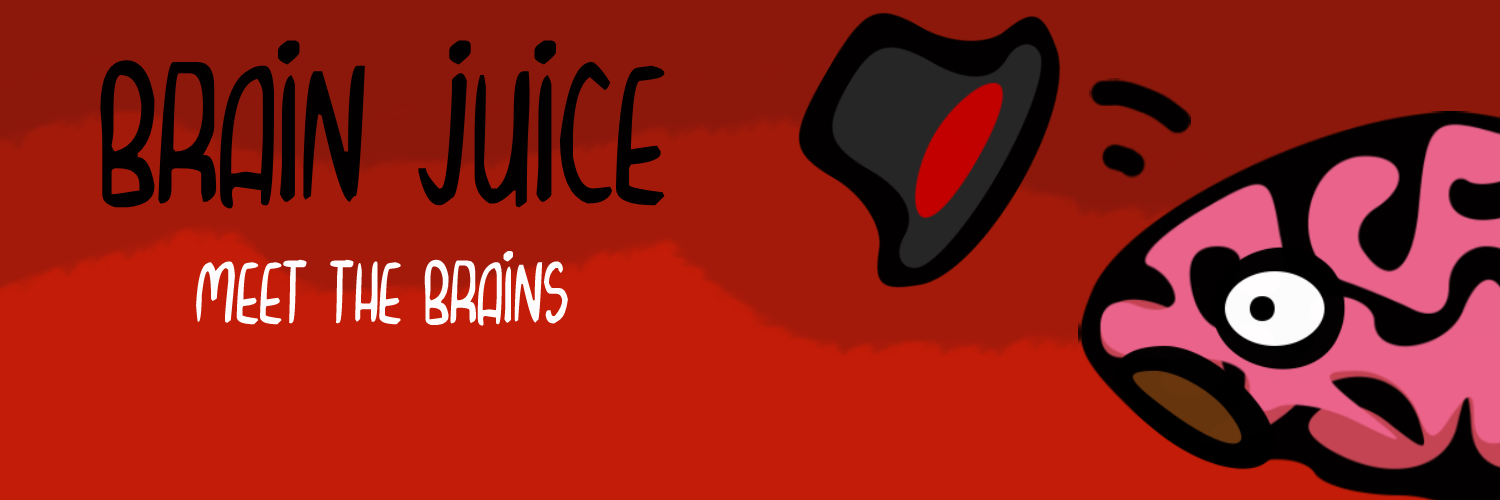
<style>
.page{position:relative;width:1500px;height:500px;background:#c31c08}
.page>*{position:absolute;margin:0}
.t1{font:163.3px "CurvyThins";color:#000000}
.t2{font:72.6px "CurvyThins";color:#ffffff}
</style>
<div class="page">
<p class="t1" style="left:100px;top:40px;width:565px;height:169px">brain juice</p>
<p class="t2" style="left:196px;top:251px;width:372px;height:75px">Meet the brains</p>
</div>
